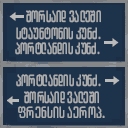
<style>
.page{position:relative;width:128px;height:128px;background:#1d324b}
.page>*{position:absolute;margin:0}
.t1{font:16.2px "ArchyEDT-Bold";color:#adadad;scale:0.74 1}
.t2{font:16.2px "ArchyEDT-Bold";letter-spacing:0.02em;color:#adadad;scale:0.8 1}
</style>
<div class="page">
<p class="t1" style="left:26px;top:10px;width:75px;height:13px">შორსაიდ ვალეში</p>
<p class="t1" style="left:16px;top:27px;width:85px;height:13px">სტაუნტონის კუნძ.</p>
<p class="t1" style="left:15px;top:42px;width:85px;height:13px">პორტლანდის კუნძ.</p>
<p class="t1" style="left:16px;top:74px;width:85px;height:13px">პორტლანდის კუნძ.</p>
<p class="t1" style="left:24px;top:91px;width:75px;height:13px">შორსაიდ ვალეში</p>
<p class="t2" style="left:18px;top:106px;width:87px;height:12px">ფრენსის აეროპ.</p>
</div>
